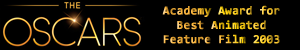
<style>
.page{position:relative;width:300px;height:50px;background:#000000}
.page>*{position:absolute;margin:0}
.t1{font:12px "Consolas-Bold";font-weight:bold}
</style>
<div class="page">
<p class="t1" style="left:162px;top:5px;width:118px;height:39px;text-align:center">Academy Award for Best Animated<br>Feature Film 2003</p>
</div>
